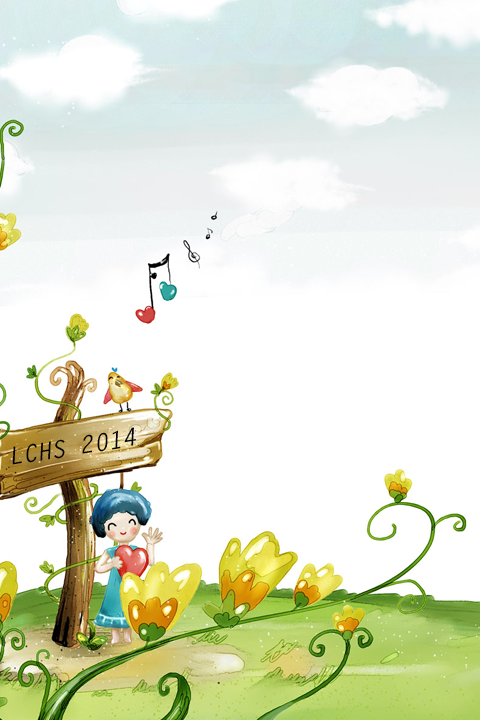
<style>
.page{position:relative;width:480px;height:720px;background:#ffffff}
.page>*{position:absolute;margin:0}
.t1{font:24px "LetterGothicStd-BoldSlanted";color:#000000}
</style>
<div class="page">
<p class="t1" style="left:12px;top:427px;width:124px;height:38px;rotate:-9deg">LCHS 2014</p>
</div>
